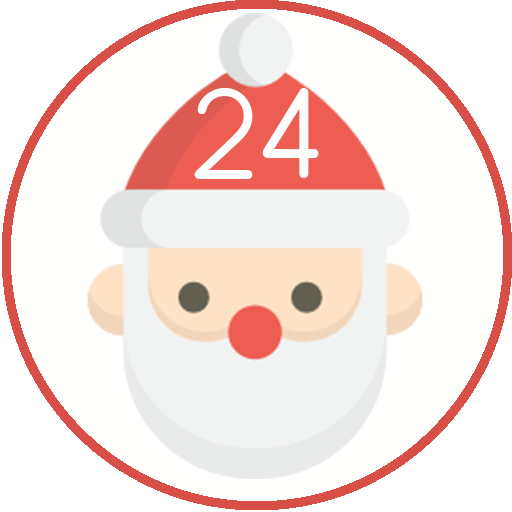
<style>
.page{position:relative;width:512px;height:512px;background:#fffffe}
.page>*{position:absolute;margin:0}
.t1{font:142.2px "Antipasto";color:#fffefe}
</style>
<div class="page">
<p class="t1" style="left:194px;top:88px;width:125px;height:91px">24</p>
</div>
